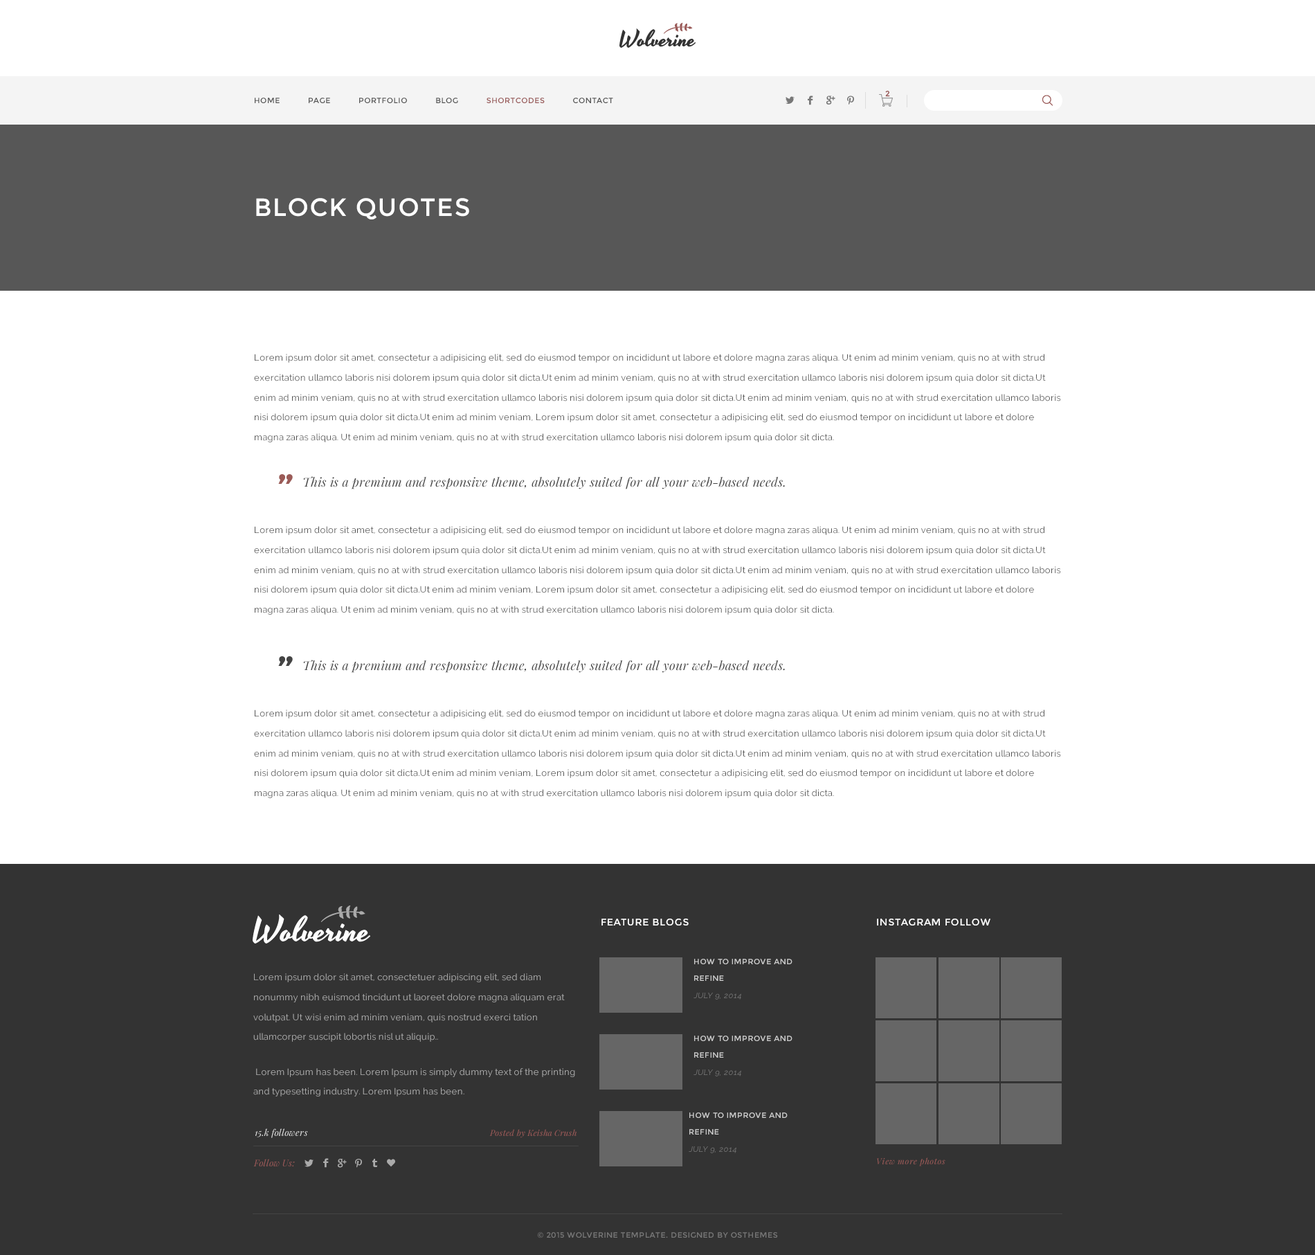
<style>
.page{position:relative;width:1315px;height:1255px;background:#ffffff}
.page>*{position:absolute;margin:0}
.t1{font:7.6px "Montserrat-Regular";letter-spacing:0.05em;color:#535353}
.t2{font:7.6px "Montserrat-Regular";letter-spacing:0.05em;color:#995958}
.t3{font:7.6px "Montserrat-Regular";color:#9a5a58;font-weight:bold}
.t4{font:24.9px "Montserrat-Regular";letter-spacing:0.05em;color:#ffffff}
.t5{font:9px/19.8px "Raleway-Regular";letter-spacing:0.02em;color:#525252}
.t6{font:48.5px "Montserrat-Regular";color:#9b5b57}
.t7{font:12.5px "PlayfairDisplay-Italic";letter-spacing:0.01em;color:#444444}
.t8{font:48.5px "Montserrat-Regular";color:#444444}
.t9{font:9.7px "Montserrat-Regular";letter-spacing:0.05em;color:#ffffff}
.t10{font:7.6px/16.8px "Montserrat-Regular";letter-spacing:0.05em;color:#cccccc}
.t11{font:7.6px/16.8px "Raleway-Regular";letter-spacing:0.05em;color:#777777;font-style:italic}
.t12{font:9px/19.8px "Raleway-Regular";letter-spacing:0.02em;color:#aaaaaa}
.t13{font:9px "PlayfairDisplay-Italic";letter-spacing:0.02em;color:#dddddd}
.t14{font:8.3px "PlayfairDisplay-Italic";letter-spacing:0.02em;color:#9a5a58}
.t15{font:8.3px "PlayfairDisplay-Italic";letter-spacing:0.05em;color:#9a5a58}
.t16{font:9px "PlayfairDisplay-Italic";letter-spacing:0.02em;color:#995958}
.t17{font:7.6px "Montserrat-Regular";letter-spacing:0.05em;color:#777777}
</style>
<div class="page">
<p class="t1" style="left:255px;top:98px;width:358px;height:5px">HOME      PAGE      PORTFOLIO      BLOG      <span class="t2">SHORTCODES</span>      CONTACT</p>
<p class="t3" style="left:885px;top:91px;width:5px;height:6px">2</p>
<p class="t4" style="left:256px;top:198px;width:213px;height:21px">BLOCK QUOTES</p>
<p class="t5" style="left:254px;top:354px;width:807px;height:88px">Lorem ipsum dolor sit amet, consectetur a adipisicing elit, sed do eiusmod tempor on incididunt ut labore et dolore magna zaras aliqua. Ut enim ad minim veniam, quis no at with strud exercitation ullamco laboris nisi dolorem ipsum quia dolor sit dicta.Ut enim ad minim veniam, quis no at with strud exercitation ullamco laboris nisi dolorem ipsum quia dolor sit dicta.Ut enim ad minim veniam, quis no at with strud exercitation ullamco laboris nisi dolorem ipsum quia dolor sit dicta.Ut enim ad minim veniam, quis no at with strud exercitation ullamco laboris nisi dolorem ipsum quia dolor sit dicta.Ut enim ad minim veniam, Lorem ipsum dolor sit amet, consectetur a adipisicing elit, sed do eiusmod tempor on incididunt ut labore et dolore magna zaras aliqua. Ut enim ad minim veniam, quis no at with strud exercitation ullamco laboris nisi dolorem ipsum quia dolor sit dicta.</p>
<p class="t6" style="left:278px;top:474px;width:15px;height:10px">”</p>
<p class="t7" style="left:303px;top:476px;width:482px;height:13px">This is a premium and responsive theme, absolutely suited for all your web-based needs.</p>
<p class="t5" style="left:254px;top:526px;width:807px;height:89px">Lorem ipsum dolor sit amet, consectetur a adipisicing elit, sed do eiusmod tempor on incididunt ut labore et dolore magna zaras aliqua. Ut enim ad minim veniam, quis no at with strud exercitation ullamco laboris nisi dolorem ipsum quia dolor sit dicta.Ut enim ad minim veniam, quis no at with strud exercitation ullamco laboris nisi dolorem ipsum quia dolor sit dicta.Ut enim ad minim veniam, quis no at with strud exercitation ullamco laboris nisi dolorem ipsum quia dolor sit dicta.Ut enim ad minim veniam, quis no at with strud exercitation ullamco laboris nisi dolorem ipsum quia dolor sit dicta.Ut enim ad minim veniam, Lorem ipsum dolor sit amet, consectetur a adipisicing elit, sed do eiusmod tempor on incididunt ut labore et dolore magna zaras aliqua. Ut enim ad minim veniam, quis no at with strud exercitation ullamco laboris nisi dolorem ipsum quia dolor sit dicta.</p>
<p class="t8" style="left:278px;top:656px;width:15px;height:10px">”</p>
<p class="t7" style="left:303px;top:660px;width:482px;height:13px">This is a premium and responsive theme, absolutely suited for all your web-based needs.</p>
<p class="t5" style="left:254px;top:710px;width:807px;height:88px">Lorem ipsum dolor sit amet, consectetur a adipisicing elit, sed do eiusmod tempor on incididunt ut labore et dolore magna zaras aliqua. Ut enim ad minim veniam, quis no at with strud exercitation ullamco laboris nisi dolorem ipsum quia dolor sit dicta.Ut enim ad minim veniam, quis no at with strud exercitation ullamco laboris nisi dolorem ipsum quia dolor sit dicta.Ut enim ad minim veniam, quis no at with strud exercitation ullamco laboris nisi dolorem ipsum quia dolor sit dicta.Ut enim ad minim veniam, quis no at with strud exercitation ullamco laboris nisi dolorem ipsum quia dolor sit dicta.Ut enim ad minim veniam, Lorem ipsum dolor sit amet, consectetur a adipisicing elit, sed do eiusmod tempor on incididunt ut labore et dolore magna zaras aliqua. Ut enim ad minim veniam, quis no at with strud exercitation ullamco laboris nisi dolorem ipsum quia dolor sit dicta.</p>
<p class="t9" style="left:602px;top:919px;width:87px;height:7px">FEATURE BLOGS</p>
<p class="t9" style="left:877px;top:919px;width:114px;height:7px">INSTAGRAM FOLLOW</p>
<p class="t10" style="left:694px;top:959px;width:99px;height:41px">HOW TO IMPROVE AND REFINE <br><span class="t11">JULY 9, 2014</span></p>
<p class="t12" style="left:253px;top:973px;width:322px;height:124px">Lorem ipsum dolor sit amet, consectetuer adipiscing elit, sed diam nonummy nibh euismod tincidunt ut laoreet dolore magna aliquam erat volutpat. Ut wisi enim ad minim veniam, quis nostrud exerci tation ullamcorper suscipit lobortis nisl ut aliquip..<br> <br> Lorem Ipsum has been. Lorem Ipsum is simply dummy text of the printing and typesetting industry. Lorem Ipsum has been.</p>
<p class="t10" style="left:694px;top:1036px;width:99px;height:41px">HOW TO IMPROVE AND REFINE <br><span class="t11">JULY 9, 2014</span></p>
<p class="t10" style="left:689px;top:1113px;width:99px;height:40px">HOW TO IMPROVE AND REFINE <br><span class="t11">JULY 9, 2014</span></p>
<p class="t13" style="left:255px;top:1128px;width:53px;height:10px">15.k followers</p>
<p class="t14" style="left:489px;top:1129px;width:88px;height:9px">Posted by Keisha Crush</p>
<p class="t15" style="left:877px;top:1158px;width:69px;height:9px">View more photos</p>
<p class="t16" style="left:253px;top:1159px;width:42px;height:8px">Follow Us:</p>
<p class="t17" style="left:537px;top:1232px;width:241px;height:7px">© 2015 WOLVERINE TEMPLATE. DESIGNED BY OSTHEMES</p>
</div>
